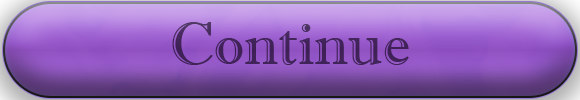
<style>
.page{position:relative;width:580px;height:100px}
.page>*{position:absolute;margin:0}
.t1{font:60px "ImprintMT-Shadow";color:#402359}
</style>
<div class="page">
<p class="t1" style="left:172px;top:22px;width:237px;height:43px">Continue</p>
</div>
